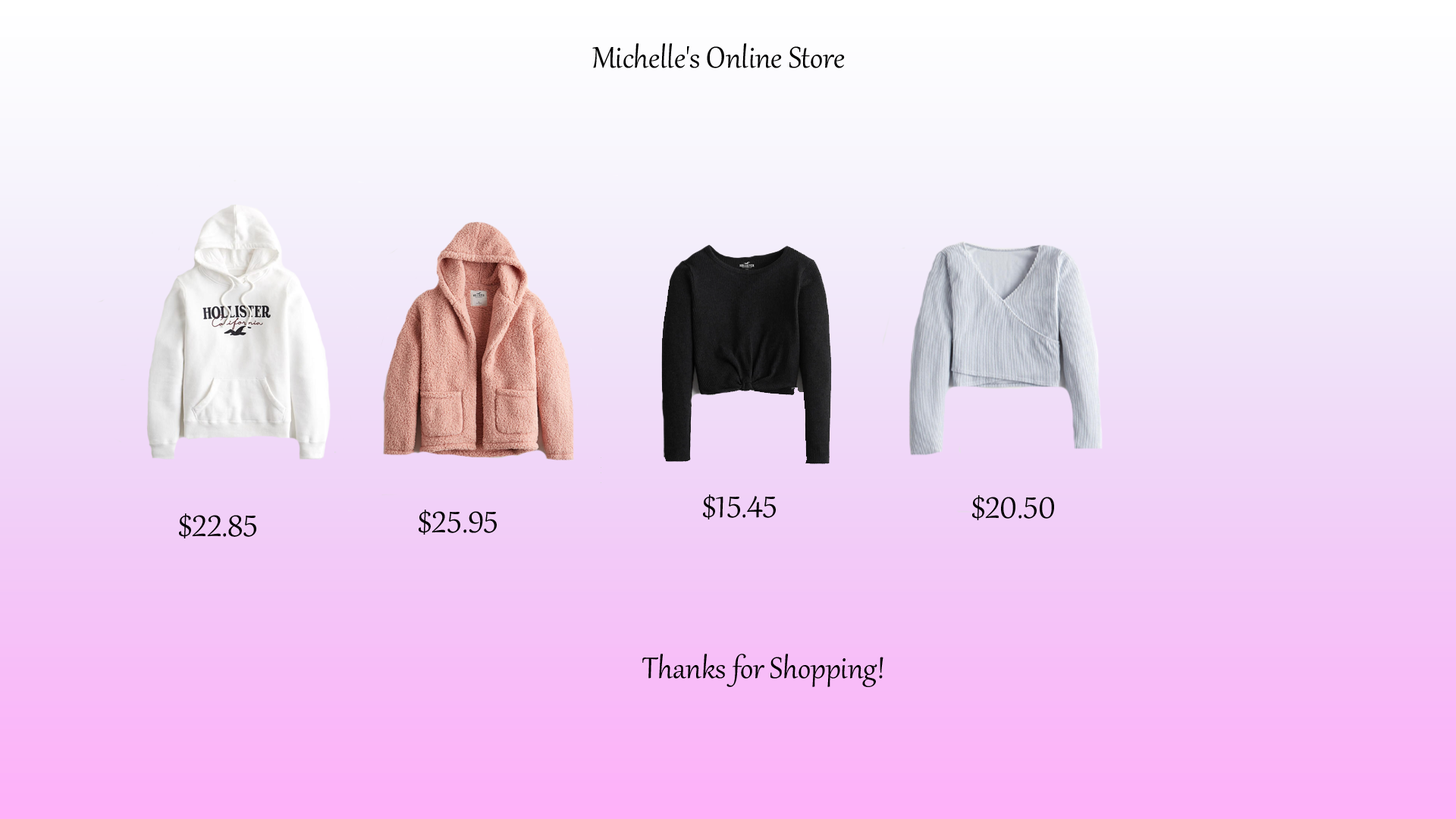
<style>
.page{position:relative;width:1456px;height:819px}
.page>*{position:absolute;margin:0}
.t1{font:36.4px "Gabriola";color:#000000}
</style>
<div class="page">
<p class="t1" style="left:592px;top:43px;width:253px;height:25px">Michelle's Online Store</p>
<p class="t1" style="left:703px;top:494px;width:73px;height:25px">$15.45</p>
<p class="t1" style="left:972px;top:495px;width:82px;height:25px">$20.50</p>
<p class="t1" style="left:419px;top:510px;width:78px;height:25px">$25.95</p>
<p class="t1" style="left:179px;top:513px;width:77px;height:25px">$22.85</p>
<p class="t1" style="left:642px;top:654px;width:241px;height:33px">Thanks for Shopping!</p>
</div>
